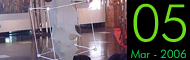
<style>
.page{position:relative;width:190px;height:60px;background:#000000}
.page>*{position:absolute;margin:0}
.t1{font:51.6px "FuturaBT-Light";color:#6dde1a}
.t2{font:11.4px "FuturaBT-Light";color:#11b748}
</style>
<div class="page">
<p class="t1" style="left:133px;top:3px;width:53px;height:39px">05</p>
<p class="t2" style="left:131px;top:49px;width:55px;height:9px">Mar - 2006</p>
</div>
